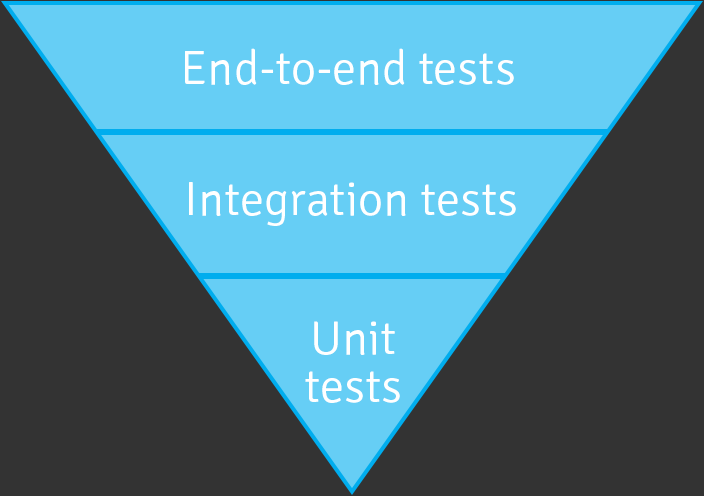
<style>
.page{position:relative;width:704px;height:496px;background:#333333}
.page>*{position:absolute;margin:0}
.t1{font:48px "Signika-Light";color:#ffffff}
.t2{font:48px/48px "Signika-Light";color:#ffffff}
</style>
<div class="page">
<p class="t1" style="left:185px;top:48px;width:329px;height:37px">End-to-end tests</p>
<p class="t1" style="left:189px;top:182px;width:327px;height:44px">Integration tests</p>
<p class="t2" style="left:305px;top:321px;width:95px;height:82px;text-align:center">Unit<br>tests</p>
</div>
